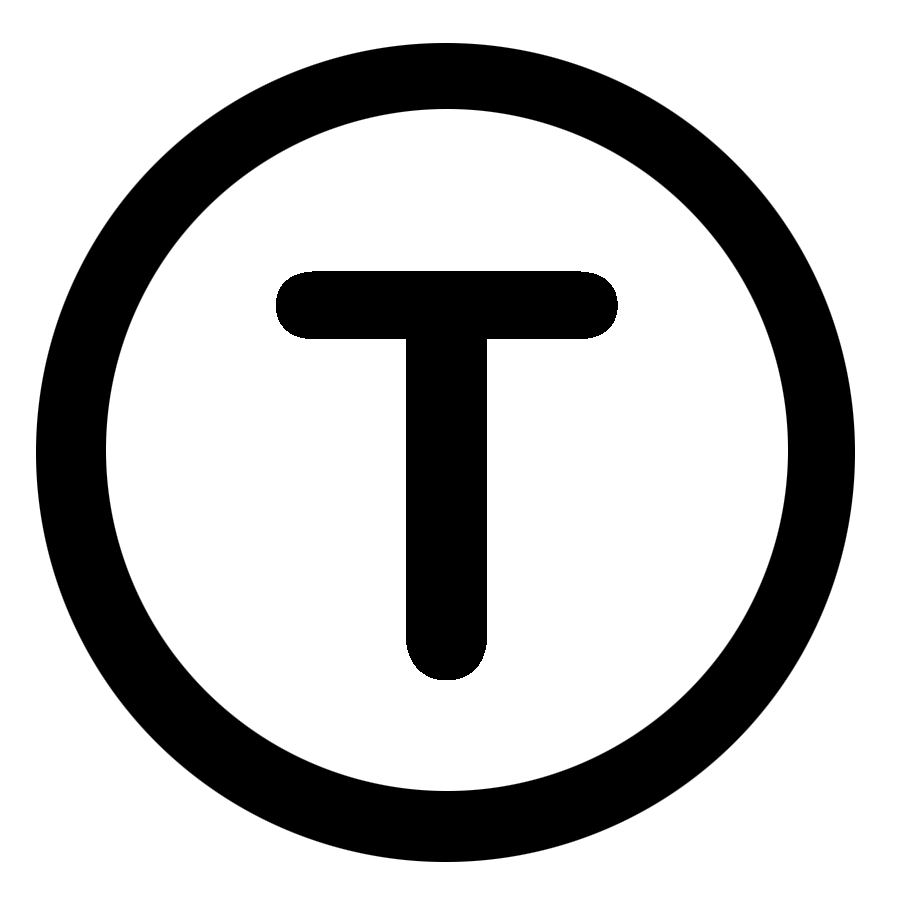
<style>
.page{position:relative;width:900px;height:900px;background:#ffffff}
.page>*{position:absolute;margin:0}
.t1{font:560px "ArialRoundedMTBold";color:#000000}
</style>
<div class="page">
<p class="t1" style="left:276px;top:271px;width:342px;height:409px">T</p>
</div>
